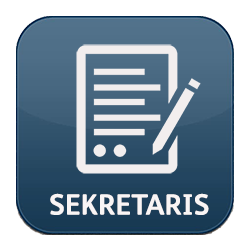
<style>
.page{position:relative;width:250px;height:250px;background:#ffffff}
.page>*{position:absolute;margin:0}
.t1{font:29.3px "XeroxSans-Bold";color:#f9f5f5}
</style>
<div class="page">
<p class="t1" style="left:50px;top:193px;width:159px;height:22px">SEKRETARIS</p>
</div>
